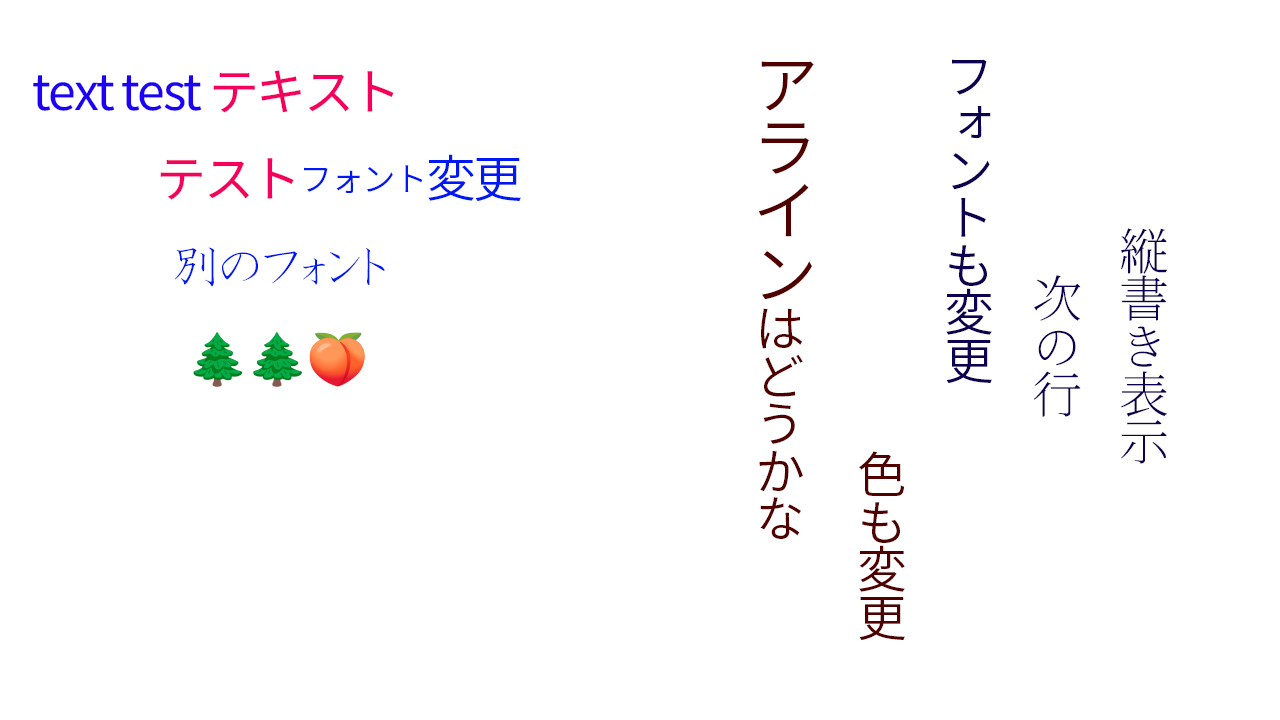
<style>
.page{position:relative;width:1280px;height:720px;background:#ffffff}
.page>*{position:absolute;margin:0}
.t1{font:12px "NotoSerifJP-ExtraLight";letter-spacing:-0.05em;color:#0c0051}
.t2{font:12px "SourceHanSansJP-Normal";letter-spacing:-0.05em;color:#0c0051}
.t3{font:12px "SourceHanSansJP-Normal";letter-spacing:-0.05em;color:#510000}
.t4{font:66.7px "SourceHanSansJP-Normal";letter-spacing:-0.05em;color:#510000}
.t5{font:12px "NotoSansJP-Regular";letter-spacing:-0.05em}
.t6{font:33.3px "SourceHanSansJP-Normal";letter-spacing:-0.05em}
.t7{font:12px "SourceHanSansJP-Normal";letter-spacing:-0.05em}
.t8{font:12px "HGPKyokashotai";letter-spacing:-0.05em}
.t9{font:12px "NotoColorEmoji-SVG";letter-spacing:-0.05em}
</style>
<div class="page">
<p class="t1" style="left:758px;top:59px;width:410px;height:582px;text-align:center">縦書き表示<br>次の行<br><span class="t2">フォントも変更<br></span><span class="t3">色も変更<br></span><span class="t4">アライン</span><span class="t3">はどうかな</span></p>
<p class="t5" style="left:33px;top:70px;width:488px;height:317px">text test テキスト<br>テスト<span class="t6">フォント</span><span class="t7">変更<br></span><span class="t8">別のフォント<br></span><span class="t9">🌲🌲🍑</span></p>
</div>
